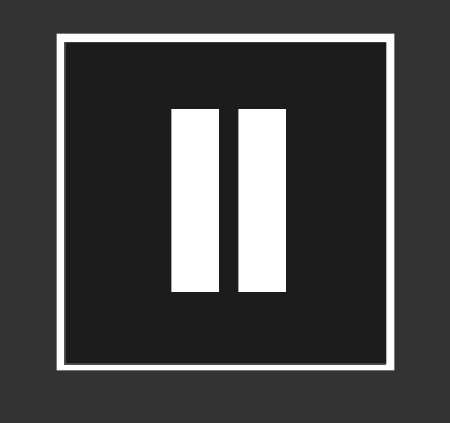
<style>
.page{position:relative;width:450px;height:423px;background:#1c1c1c}
.page>*{position:absolute;margin:0}
.t1{font:231.4px "Impact";color:#ffffff;text-transform:uppercase}
</style>
<div class="page">
<p class="t1" style="left:171px;top:109px;width:115px;height:183px">II</p>
</div>
